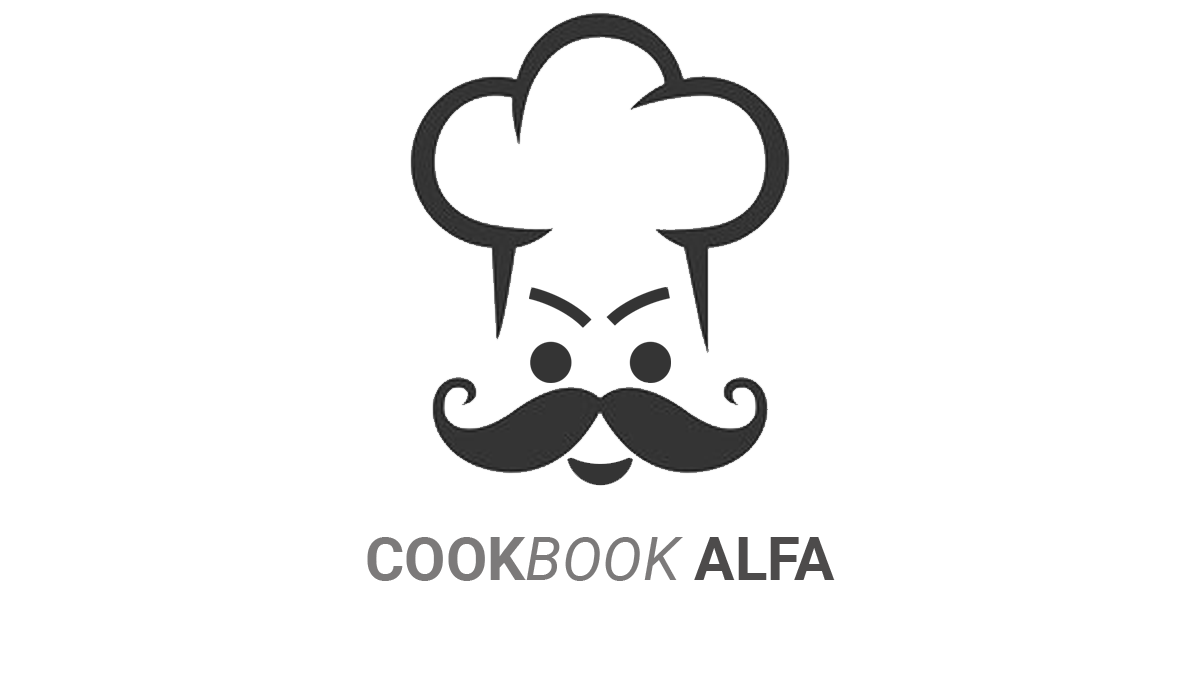
<style>
.page{position:relative;width:1200px;height:675px;background:#ffffff}
.page>*{position:absolute;margin:0}
.t1{font:60px "Roboto-Bold";color:#7c7a7a}
.t2{font:60px "Roboto-Italic";color:#7c7a7a}
.t3{font:60px "Roboto-Bold";color:#4d4b4b}
</style>
<div class="page">
<p class="t1" style="left:367px;top:537px;width:468px;height:44px">COOK<span class="t2">BOOK </span><span class="t3">ALFA</span></p>
</div>
